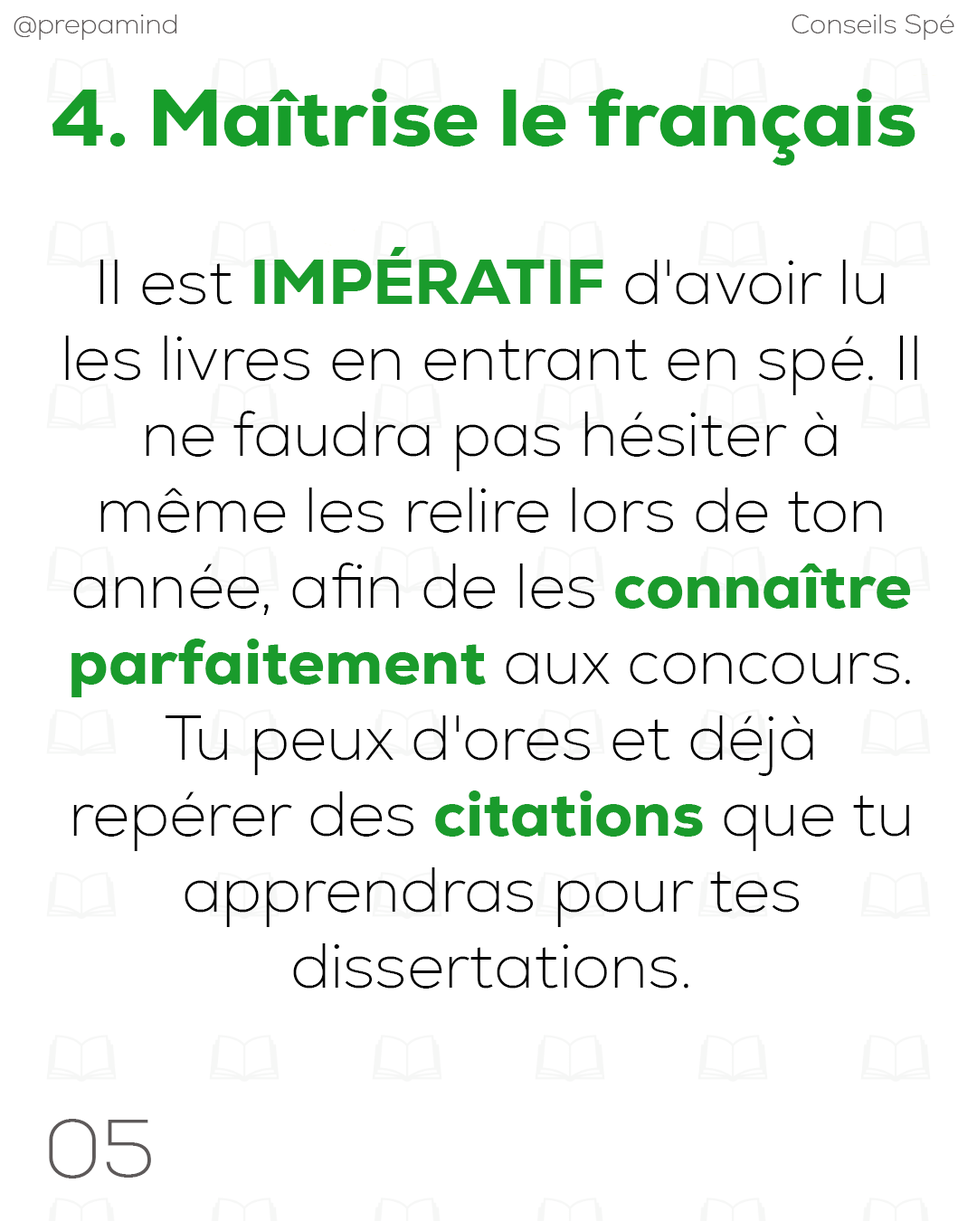
<style>
.page{position:relative;width:977px;height:1221px;background:#ffffff}
.page>*{position:absolute;margin:0}
.t1{font:27.1px "Nexa-ExtraLight";color:#5e5a5a}
.t2{font:81.2px "Nexa-Heavy";color:#179d2a}
.t3{font:63.3px "Nexa-ExtraLight";color:#000000}
.t4{font:63.3px "Nexa-Heavy";color:#1a9b2c}
.t5{font:81.7px "Nexa-ExtraLight";color:#5e5a5a}
</style>
<div class="page">
<p class="t1" style="left:14px;top:14px;width:163px;height:26px">@prepamind</p>
<p class="t1" style="left:791px;top:14px;width:163px;height:26px">Conseils Spé</p>
<p class="t2" style="left:52px;top:89px;width:863px;height:76px">4. Maîtrise le français</p>
<p class="t3" style="left:65px;top:247px;width:852px;height:741px;text-align:center">Il est <span class="t4">IMPÉRATIF</span> d'avoir lu les livres en entrant en spé. Il ne faudra pas hésiter à même les relire lors de ton année, afin de les <span class="t4">connaître parfaitement</span> aux concours. Tu peux d'ores et déjà repérer des <span class="t4">citations</span> que tu apprendras pour tes dissertations.</p>
<p class="t5" style="left:49px;top:1119px;width:102px;height:59px">05</p>
</div>
